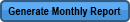
<style>
.page{position:relative;width:130px;height:22px;background:#5facf3}
.page>*{position:absolute;margin:0}
.t1{font:11px "Arial-BoldMT";color:#000000;scale:0.86 1}
</style>
<div class="page">
<p class="t1" style="left:8px;top:7px;width:113px;height:10px">Generate Monthly Report</p>
</div>
